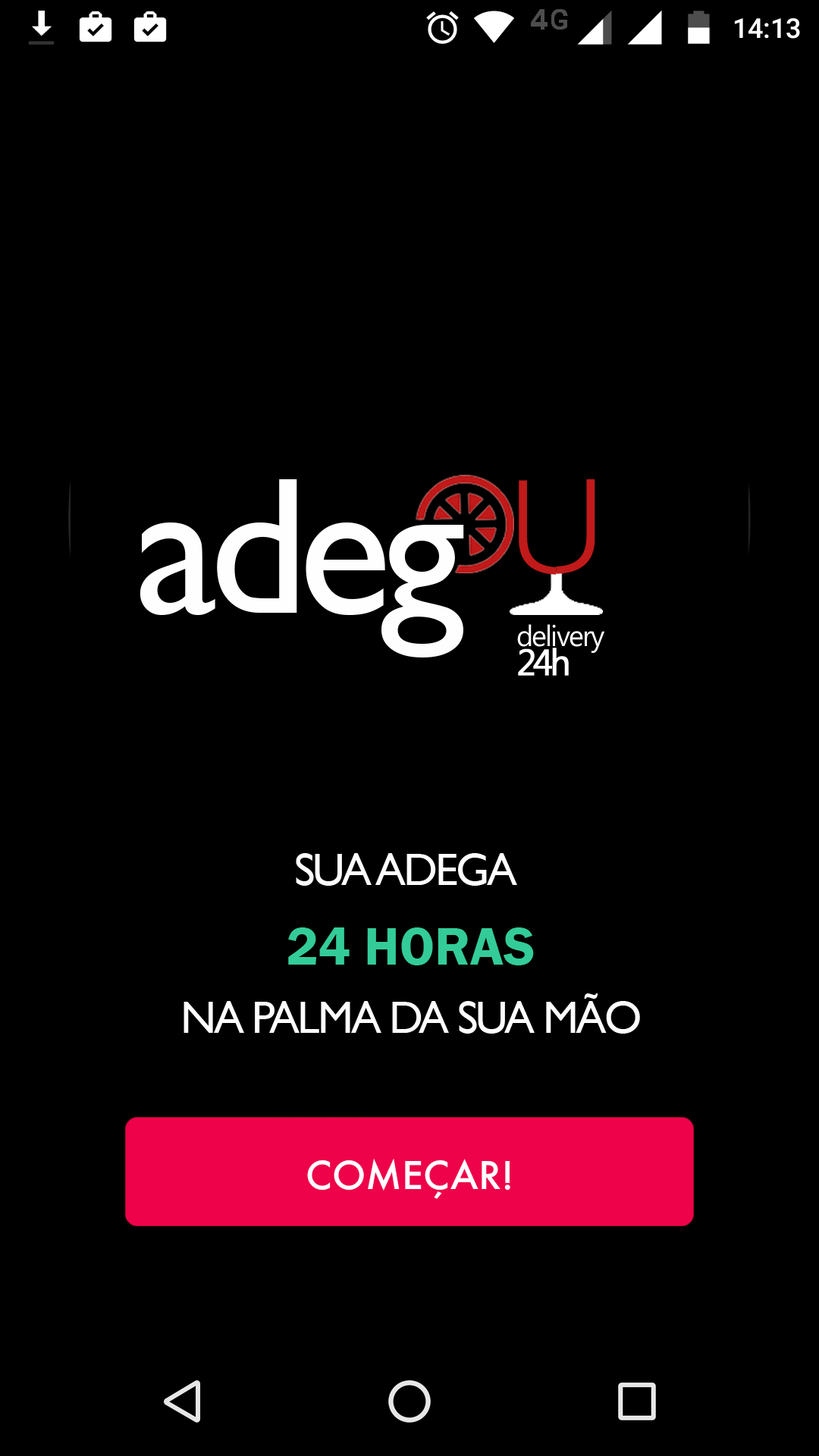
<style>
.page{position:relative;width:819px;height:1456px;background:#000000}
.page>*{position:absolute;margin:0}
.t1{font:195.5px "GillSansMT";letter-spacing:-0.05em;color:#fefefe}
.t2{font:179.1px "HelveticaNeueLTPro-ThEx";letter-spacing:-0.05em;color:#c01a1a}
.t3{font:178.6px "HelveticaNeueLTPro-ThEx";letter-spacing:-0.05em}
.t4{font:29.3px "MicrosoftPhagsPa";letter-spacing:-0.05em;color:#ffffff}
.t5{font:36.6px "MicrosoftPhagsPa";letter-spacing:-0.095em;color:#ffffff;font-weight:bold}
.t6{font:45.5px "GillSansMT";letter-spacing:-0.05em;color:#fefefe;text-transform:uppercase}
.t7{font:54.6px "FranklinGothic-Demi";color:#33cc99;text-transform:uppercase}
</style>
<div class="page">
<p class="t1" style="left:140px;top:479px;width:324px;height:178px">adeg</p>
<p class="t2" style="left:505px;top:479px;width:90px;height:95px;rotate:180deg">u</p>
<p class="t3" style="left:519px;top:480px;width:89px;height:95px">u</p>
<p class="t4" style="left:517px;top:624px;width:87px;height:29px">delivery</p>
<p class="t5" style="left:518px;top:648px;width:51px;height:28px">24h</p>
<p class="t6" style="left:184px;top:853px;width:456px;height:181px;text-align:center">sua adega <br><span class="t7">24 horas<br></span>NA palma da SUA MÃO</p>
</div>
